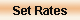
<style>
.page{position:relative;width:80px;height:20px}
.page>*{position:absolute;margin:0}
.t1{font:12px "Arial-BoldMT";color:#101010}
</style>
<div class="page">
<p class="t1" style="left:13px;top:6px;width:54px;height:9px">Set Rates</p>
</div>
